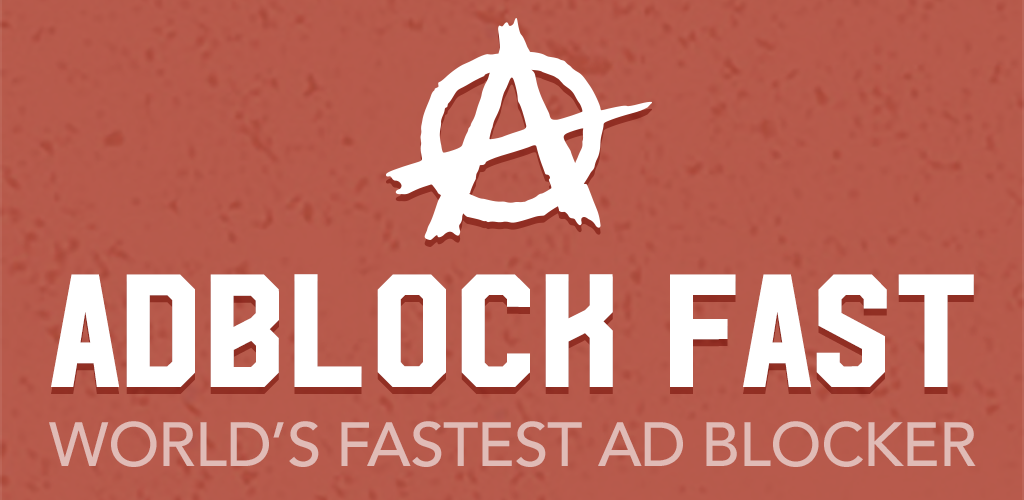
<style>
.page{position:relative;width:1024px;height:500px}
.page>*{position:absolute;margin:0}
.t1{font:160.5px "HudsonNY";color:#ffffff}
.t2{font:61.7px "Avenir-Medium";letter-spacing:-0.016em;color:#e0bbb6}
</style>
<div class="page">
<p class="t1" style="left:51px;top:274px;width:923px;height:113px">ADBLOCK FAST</p>
<p class="t2" style="left:49px;top:421px;width:927px;height:46px">WORLD’S FASTEST AD BLOCKER</p>
</div>
